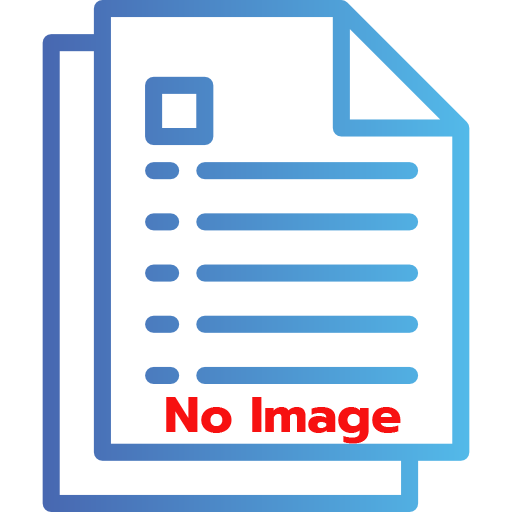
<style>
.page{position:relative;width:512px;height:512px;background:#ffffff}
.page>*{position:absolute;margin:0}
.t1{font:51px "Prompt-Bold";color:#f71111}
</style>
<div class="page">
<p class="t1" style="left:166px;top:397px;width:235px;height:47px">No Image</p>
</div>
